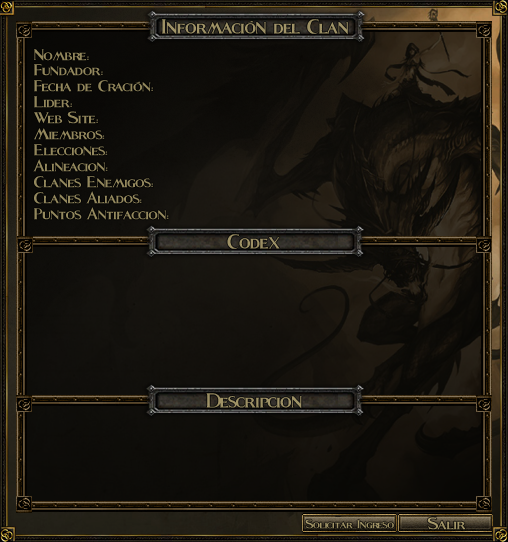
<style>
.page{position:relative;width:508px;height:542px}
.page>*{position:absolute;margin:0}
.t1{font:39px "Fleet-Street";color:#9f9266;scale:0.94 1}
.t2{font:30px "Fleet-Street";color:#93875c}
.t3{font:30px "Fleet-Street";color:#93875d}
.t4{font:30px "Fleet-Street";color:#93885d}
.t5{font:30px "Fleet-Street";color:#94885d}
.t6{font:30px "Fleet-Street";color:#94895d}
.t7{font:30px "Fleet-Street";color:#94895e}
.t8{font:39px "Fleet-Street";color:#9d9165;scale:0.94 1}
.t9{font:39px "Fleet-Street";color:#9e9266;scale:0.94 1}
.t10{font:22px "Fleet-Street";color:#a09265}
.t11{font:30px "Fleet-Street";color:#a29466}
</style>
<div class="page">
<p class="t1" style="left:161px;top:19px;width:188px;height:16px">Información del Clan</p>
<p class="t2" style="left:34px;top:49px;width:55px;height:12px">Nombre:</p>
<p class="t2" style="left:34px;top:64px;width:69px;height:12px">Fundador:</p>
<p class="t2" style="left:34px;top:80px;width:119px;height:12px">Fecha de Cración:</p>
<p class="t2" style="left:34px;top:96px;width:38px;height:12px">Lider:</p>
<p class="t2" style="left:34px;top:111px;width:64px;height:13px">Web Site:</p>
<p class="t3" style="left:34px;top:128px;width:71px;height:12px">Miembros:</p>
<p class="t4" style="left:34px;top:144px;width:74px;height:12px">Elecciones:</p>
<p class="t4" style="left:33px;top:159px;width:75px;height:13px">Alineacion:</p>
<p class="t5" style="left:34px;top:176px;width:119px;height:12px">Clanes Enemigos:</p>
<p class="t6" style="left:34px;top:191px;width:108px;height:13px">Clanes Aliados:</p>
<p class="t7" style="left:34px;top:207px;width:135px;height:13px">Puntos Antifaccion:</p>
<p class="t8" style="left:227px;top:234px;width:53px;height:15px">Codex</p>
<p class="t9" style="left:206px;top:393px;width:96px;height:16px">Descripcion</p>
<p class="t10" style="left:305px;top:519px;width:89px;height:10px">Solicitar Ingreso</p>
<p class="t11" style="left:427px;top:517px;width:39px;height:13px">Salir</p>
</div>
